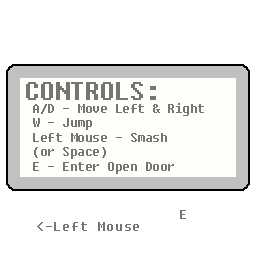
<style>
.page{position:relative;width:256px;height:256px;background:#ffffff}
.page>*{position:absolute;margin:0}
.t1{font:24px "Fixedsys";color:#757575}
.t2{font:12px "Fixedsys";color:#757575}
.t3{font:14px "Fixedsys";color:#757575}
</style>
<div class="page">
<p class="t1" style="left:26px;top:82px;width:130px;height:18px">CONTROLS:</p>
<p class="t2" style="left:33px;top:103px;width:171px;height:71px">A/D - Move Left &amp; Right<br>W - Jump<br>Left Mouse - Smash<br>(or Space)<br>E - Enter Open Door</p>
<p class="t3" style="left:37px;top:222px;width:102px;height:9px">&lt;-Left Mouse</p>
<p class="t3" style="left:180px;top:210px;width:6px;height:9px">E</p>
</div>
